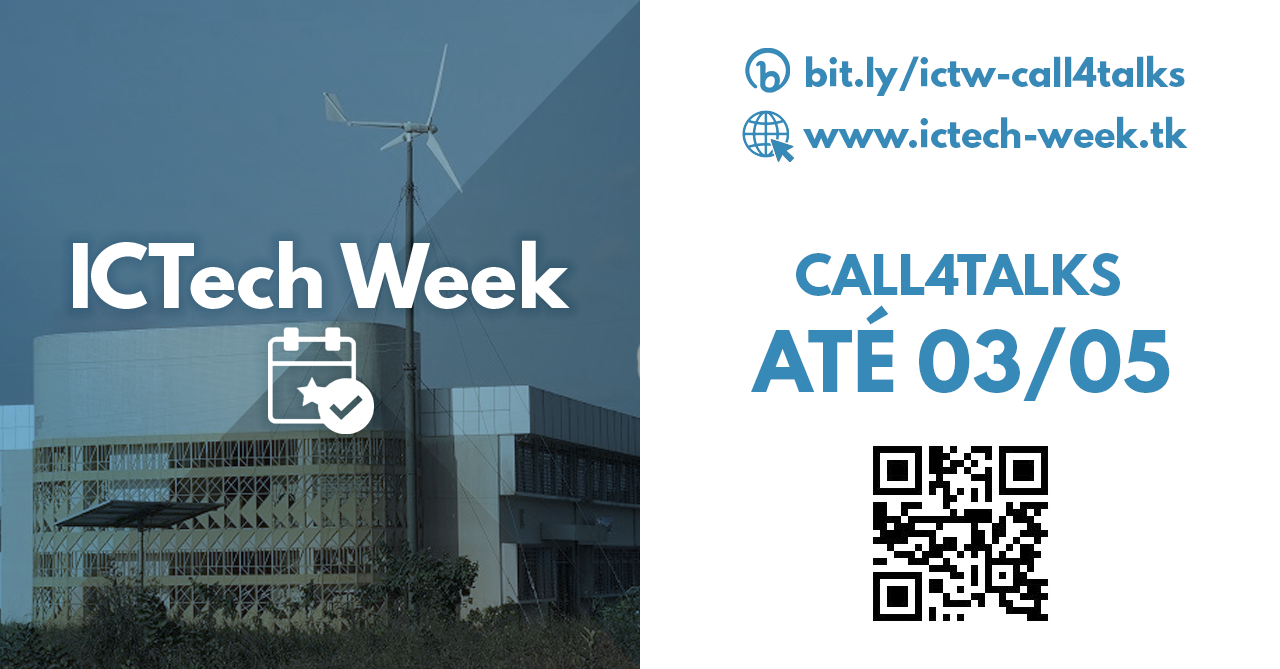
<style>
.page{position:relative;width:1280px;height:669px;background:#ffffff}
.page>*{position:absolute;margin:0}
.t1{font:35.3px "LeagueSpartan-Bold";color:#378ab7}
.t2{font:78.3px "LeagueSpartan-Bold";color:#ffffff}
.t3{font:49.2px "LeagueSpartan-Bold";color:#378ab7}
.t4{font:75.3px "LeagueSpartan-Bold";color:#378ab7}
</style>
<div class="page">
<p class="t1" style="left:806px;top:55px;width:379px;height:41px">bit.ly/ictw-call4talks</p>
<p class="t1" style="left:803px;top:116px;width:385px;height:32px">www.ictech-week.tk</p>
<p class="t2" style="left:73px;top:240px;width:497px;height:69px">ICTech Week</p>
<p class="t3" style="left:796px;top:253px;width:324px;height:43px">CALL4TALKS</p>
<p class="t4" style="left:751px;top:305px;width:419px;height:96px">ATÉ 03/05</p>
</div>
